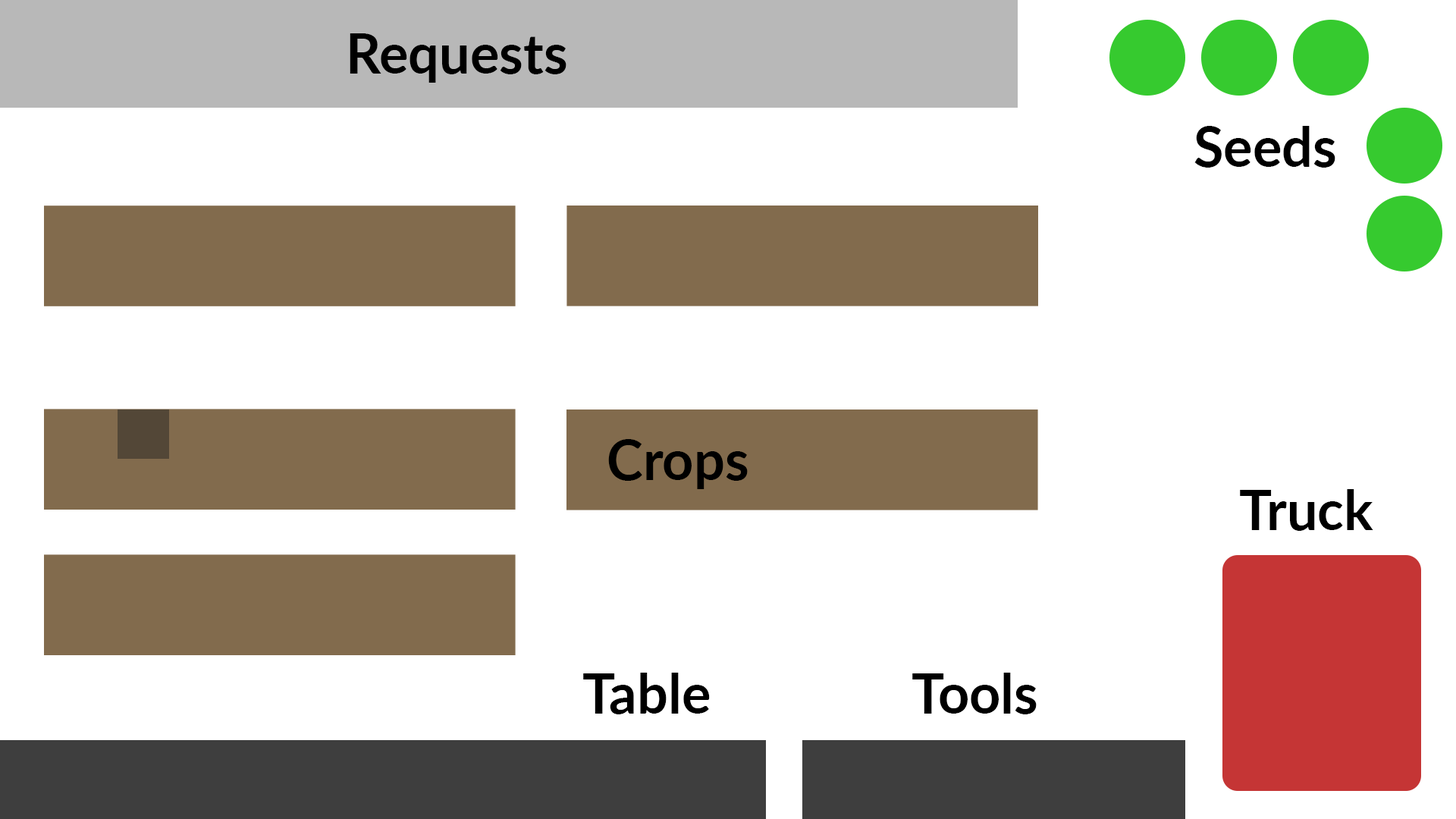
<style>
.page{position:relative;width:1456px;height:819px;background:#ffffff}
.page>*{position:absolute;margin:0}
.t1{font:54.6px "Lato-Bold";color:#000000}
</style>
<div class="page">
<p class="t1" style="left:350px;top:33px;width:216px;height:50px">Requests</p>
<p class="t1" style="left:1194px;top:126px;width:141px;height:42px">Seeds</p>
<p class="t1" style="left:608px;top:439px;width:140px;height:50px">Crops</p>
<p class="t1" style="left:1240px;top:489px;width:133px;height:42px">Truck</p>
<p class="t1" style="left:583px;top:673px;width:127px;height:41px">Table</p>
<p class="t1" style="left:912px;top:673px;width:125px;height:41px">Tools</p>
</div>
